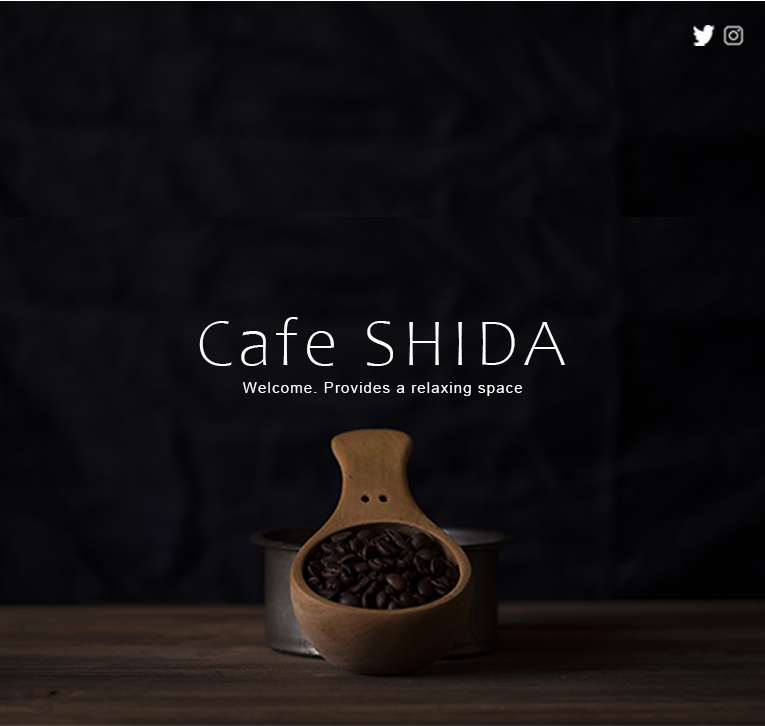
<style>
.page{position:relative;width:765px;height:726px}
.page>*{position:absolute;margin:0}
.t1{font:68px "Candara-Light";letter-spacing:0.075em;color:#fdfcfc}
.t2{font:15px "ArialMT";letter-spacing:0.075em;color:#fdfcfc}
</style>
<div class="page">
<p class="t1" style="left:199px;top:317px;width:366px;height:49px">Cafe SHIDA</p>
<p class="t2" style="left:243px;top:382px;width:279px;height:14px">Welcome. Provides a relaxing space</p>
</div>
